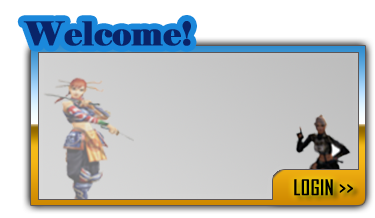
<style>
.page{position:relative;width:375px;height:218px}
.page>*{position:absolute;margin:0}
.t1{font:32.6px "Elephant-Regular";color:#092469;font-weight:bold}
.t2{font:20.6px "AgencyFB-Reg";color:#000000;font-weight:bold}
</style>
<div class="page">
<p class="t1" style="left:23px;top:21px;width:168px;height:25px">Welcome!</p>
<p class="t2" style="left:294px;top:179px;width:59px;height:17px">LOGIN &gt;&gt;</p>
</div>
